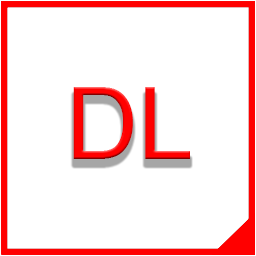
<style>
.page{position:relative;width:256px;height:256px;background:#ffffff}
.page>*{position:absolute;margin:0}
.t1{font:100px "ArialMT";color:#ff0000}
</style>
<div class="page">
<p class="t1" style="left:73px;top:87px;width:117px;height:72px">DL</p>
</div>
